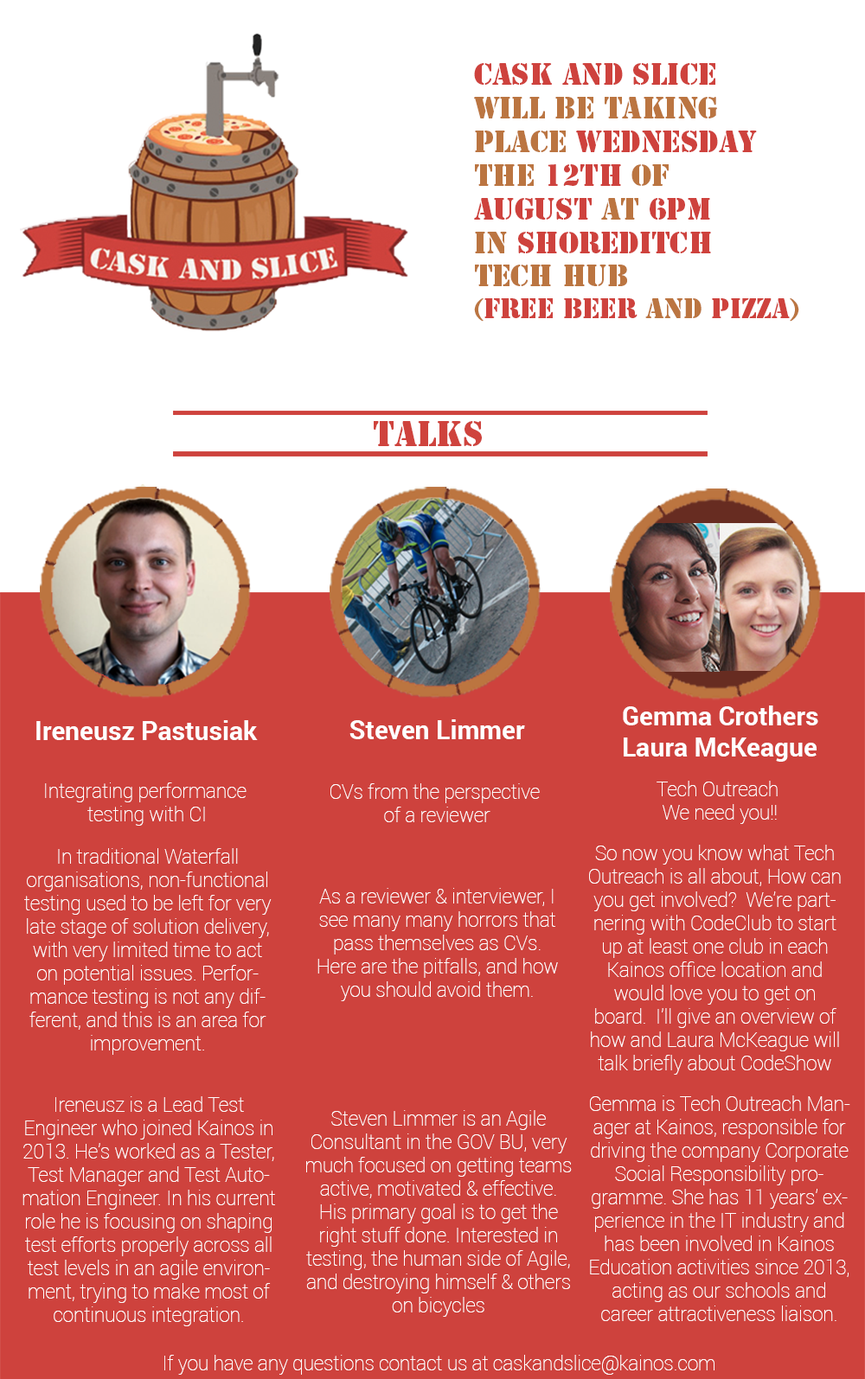
<style>
.page{position:relative;width:865px;height:1379px;background:#ce423d}
.page>*{position:absolute;margin:0}
.t1{font:28.1px "StencilStd";color:#bb7541}
.t2{font:28.1px "StencilStd";color:#ce423d}
.t3{font:25.9px "StencilStd";color:#bb7541}
.t4{font:25.9px "StencilStd";color:#ce423d}
.t5{font:32.4px "StencilStd";color:#cf433d}
.t6{font:25.9px "Roboto-Bold";color:#ffffff}
.t7{font:19.5px "Roboto-Thin";color:#ffffff}
</style>
<div class="page">
<p class="t1" style="left:474px;top:63px;width:325px;height:259px"><span class="t2">Cask and slice<br></span>will be taking <br>place <span class="t2">Wednesday</span> <br>the <span class="t2">12th</span> of <br><span class="t2">August</span> at <span class="t2">6PM<br></span>in <span class="t2">shoreditch<br></span>tech hub <br><span class="t3">(</span><span class="t4">Free beer </span><span class="t3">and </span><span class="t4">Pizza</span><span class="t3">)</span></p>
<p class="t5" style="left:374px;top:421px;width:108px;height:25px">TALKS</p>
<p class="t6" style="left:623px;top:706px;width:195px;height:56px">Gemma Crothers<br>Laura McKeague</p>
<p class="t6" style="left:36px;top:720px;width:222px;height:20px">Ireneusz Pastusiak</p>
<p class="t6" style="left:349px;top:719px;width:176px;height:20px">Steven Limmer</p>
<p class="t7" style="left:45px;top:783px;width:201px;height:43px;text-align:center">Integrating performance <br>testing with CI</p>
<p class="t7" style="left:330px;top:783px;width:210px;height:39px;text-align:center">CVs from the perspective <br>of a reviewer</p>
<p class="t7" style="left:656px;top:781px;width:121px;height:43px;text-align:center">Tech Outreach<br> We need you!!</p>
<p class="t7" style="left:589px;top:845px;width:251px;height:230px;text-align:center">So now you know what Tech Outreach is all about, How can you get involved?  We’re partnering with CodeClub to start up at least one club in each Kainos office location and would love you to get on board.  I’ll give an overview of how and Laura McKeague will talk briefly about CodeShow one day coding initiative.</p>
<p class="t7" style="left:24px;top:848px;width:247px;height:207px;text-align:center">In traditional Waterfall <br>organisations, non-functional testing used to be left for very late stage of solution delivery, with very limited time to act on potential issues. Performance testing is not any different, and this is an area for <br>improvement.</p>
<p class="t7" style="left:317px;top:888px;width:241px;height:113px;text-align:center">As a reviewer &amp; interviewer, I see many many horrors that pass themselves as CVs. Here are the pitfalls, and how you should avoid them.</p>
<p class="t7" style="left:22px;top:1096px;width:253px;height:230px;text-align:center">Ireneusz is a Lead Test <br>Engineer who joined Kainos in 2013. He’s worked as a Tester, Test Manager and Test Automation Engineer. In his current role he is focusing on shaping test efforts properly across all test levels in an agile environment, trying to make most of continuous integration.</p>
<p class="t7" style="left:590px;top:1096px;width:260px;height:225px;text-align:center">Gemma is Tech Outreach Manager at Kainos, responsible for driving the company Corporate Social Responsibility programme. She has 11 years’ experience in the IT industry and has been involved in Kainos Education activities since 2013, acting as our schools and career attractiveness liaison.</p>
<p class="t7" style="left:306px;top:1110px;width:266px;height:207px;text-align:center">Steven Limmer is an Agile <br>Consultant in the GOV BU, very much focused on getting teams active, motivated &amp; effective. His primary goal is to get the right stuff done. Interested in testing, the human side of Agile, and destroying himself &amp; others on bicycles</p>
<p class="t7" style="left:164px;top:1355px;width:550px;height:20px">If you have any questions contact us at caskandslice@kainos.com</p>
</div>
